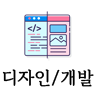
<style>
.page{position:relative;width:96px;height:96px;background:#ffffff}
.page>*{position:absolute;margin:0}
.t1{font:18px "GowunBatang-Regular";color:#000000;font-weight:bold}
</style>
<div class="page">
<p class="t1" style="left:2px;top:69px;width:92px;height:18px">디자인/개발</p>
</div>
